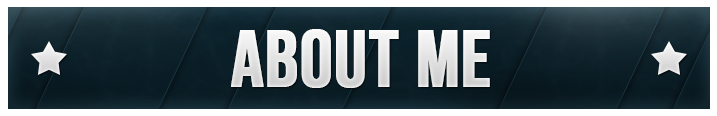
<style>
.page{position:relative;width:717px;height:116px}
.page>*{position:absolute;margin:0}
.t1{font:80px "BebasNeue-Regular";color:#e8e8e8;text-transform:uppercase;font-weight:bold}
</style>
<div class="page">
<p class="t1" style="left:231px;top:29px;width:259px;height:59px">About Me</p>
</div>
